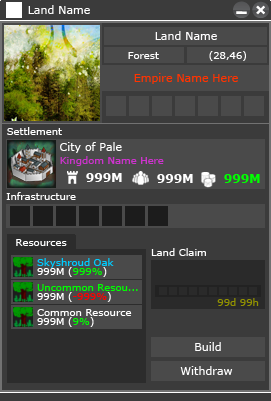
<style>
.page{position:relative;width:271px;height:401px;background:#4a4a4a}
.page>*{position:absolute;margin:0}
.t1{font:11px "Verdana";color:#ffffff}
.t2{font:11px "Verdana";color:#fffeff}
.t3{font:10px "Verdana";color:#ffffff}
.t4{font:11px "Verdana";color:#ff3300}
.t5{font:10px "Verdana";color:#cc33cc}
.t6{font:12px "Verdana-Bold";color:#ffffff}
.t7{font:12px "Verdana-Bold";color:#00ff00}
.t8{font:10px "Verdana";color:#feffff}
.t9{font:10px "Verdana";color:#00ff00}
.t10{font:10px "Verdana";color:#00ccff}
.t11{font:10px "Verdana";color:#ff0000}
.t12{font:10px "Verdana";color:#929200}
</style>
<div class="page">
<p class="t1" style="left:28px;top:5px;width:62px;height:9px">Land Name</p>
<p class="t2" style="left:155px;top:31px;width:62px;height:9px">Land Name</p>
<p class="t3" style="left:128px;top:52px;width:31px;height:7px">Forest</p>
<p class="t3" style="left:209px;top:51px;width:37px;height:10px">(28,46)</p>
<p class="t4" style="left:134px;top:73px;width:104px;height:11px">Empire Name Here</p>
<p class="t3" style="left:7px;top:127px;width:55px;height:8px">Settlement</p>
<p class="t1" style="left:60px;top:142px;width:62px;height:11px">City of Pale</p>
<p class="t5" style="left:60px;top:156px;width:104px;height:10px">Kingdom Name Here</p>
<p class="t6" style="left:86px;top:173px;width:36px;height:9px">999M</p>
<p class="t6" style="left:157px;top:174px;width:36px;height:9px">999M</p>
<p class="t7" style="left:224px;top:174px;width:36px;height:9px">999M</p>
<p class="t3" style="left:6px;top:192px;width:70px;height:8px">Infrastructure</p>
<p class="t8" style="left:16px;top:239px;width:51px;height:7px">Resources</p>
<p class="t3" style="left:151px;top:248px;width:55px;height:8px">Land Claim</p>
<p class="t3" style="left:37px;top:267px;width:70px;height:10px">999M (<span class="t9">999%</span>)</p>
<p class="t10" style="left:37px;top:258px;width:77px;height:10px">Skyshroud Oak</p>
<p class="t3" style="left:37px;top:292px;width:74px;height:10px">999M (<span class="t11">-999%</span>)</p>
<p class="t9" style="left:37px;top:284px;width:101px;height:7px">Uncommon Resou...</p>
<p class="t12" style="left:217px;top:298px;width:42px;height:8px">99d 99h</p>
<p class="t3" style="left:37px;top:317px;width:57px;height:10px">999M (<span class="t9">9%</span>)</p>
<p class="t3" style="left:37px;top:309px;width:95px;height:7px">Common Resource</p>
<p class="t1" style="left:195px;top:342px;width:26px;height:9px">Build</p>
<p class="t1" style="left:180px;top:366px;width:53px;height:9px">Withdraw</p>
</div>
